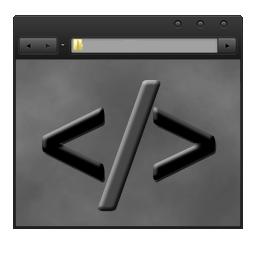
<style>
.page{position:relative;width:256px;height:256px;background:#ffffff}
.page>*{position:absolute;margin:0}
.t1{font:150px "Calibri-Bold";color:#000000}
</style>
<div class="page">
<p class="t1" style="left:42px;top:107px;width:174px;height:74px">&lt; &gt;</p>
<p class="t1" style="left:43px;top:109px;width:174px;height:74px">&lt; &gt;</p>
</div>
